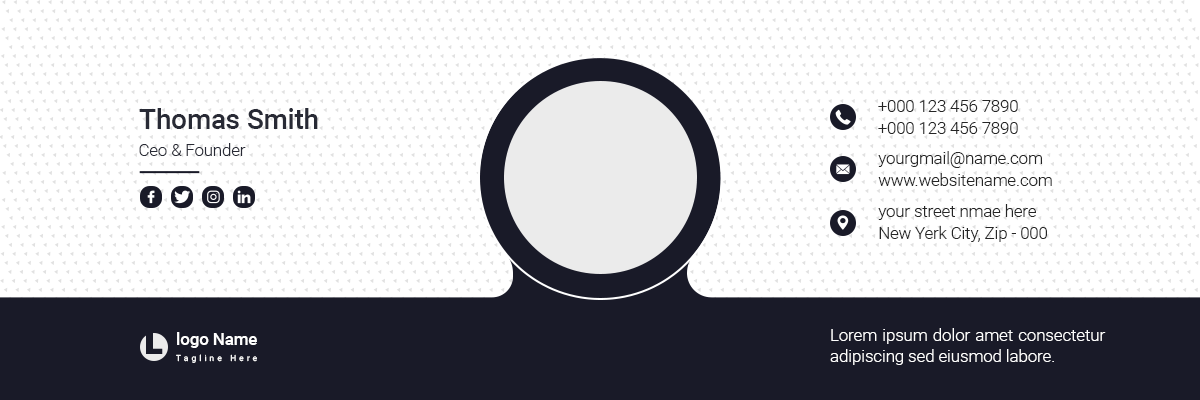
<style>
.page{position:relative;width:1200px;height:400px;background:#ffffff}
.page>*{position:absolute;margin:0}
.t1{font:16.6px/22.1px "Roboto-Light";color:#252525}
.t2{font:27.6px "Roboto-Medium";color:#282a35}
.t3{font:16.6px "Roboto-Light";color:#282a35}
.t4{font:16.7px/20.8px "Roboto-Light";color:#fefefe}
.t5{font:29.2px "Montserrat-Black";color:#191a28}
.t6{font:16.7px "Roboto-Medium";color:#ffffff}
.t7{font:8.3px "Roboto-Regular";letter-spacing:0.38em;color:#ffffff}
</style>
<div class="page">
<p class="t1" style="left:878px;top:100px;width:140px;height:34px">+000 123 456 7890<br>+000 123 456 7890</p>
<p class="t2" style="left:139px;top:108px;width:179px;height:21px">Thomas Smith</p>
<p class="t3" style="left:139px;top:143px;width:107px;height:13px">Ceo &amp; Founder</p>
<p class="t1" style="left:878px;top:151px;width:174px;height:35px">yourgmail@name.com<br>www.websitename.com</p>
<p class="t1" style="left:878px;top:204px;width:169px;height:38px">your street nmae here<br>New Yerk City, Zip - 000</p>
<p class="t4" style="left:830px;top:328px;width:276px;height:37px;text-align:justify">Lorem ipsum dolor amet consectetur adipiscing sed eiusmod labore.</p>
<p class="t5" style="left:146px;top:333px;width:17px;height:21px">L</p>
<p class="t6" style="left:177px;top:332px;width:80px;height:16px">logo Name</p>
<p class="t7" style="left:176px;top:354px;width:81px;height:9px">Tagline Here</p>
</div>
